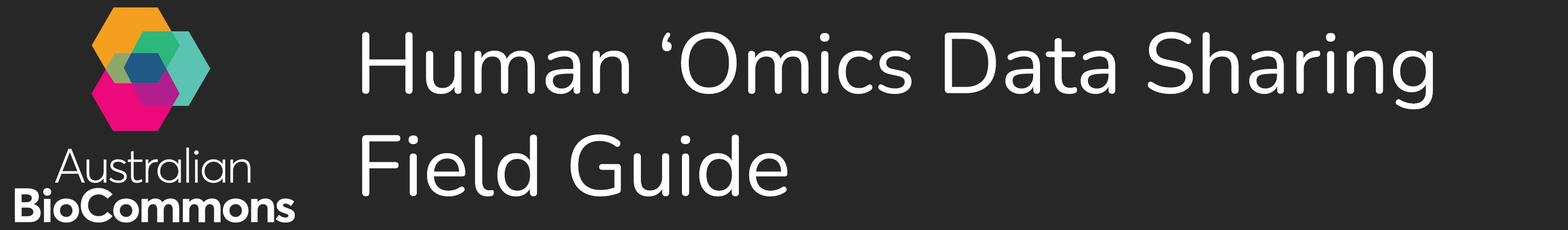
<style>
.page{position:relative;width:1568px;height:230px;background:#282728}
.page>*{position:absolute;margin:0}
.t1{font:85.5px "Nunito-Regular";color:#ffffff}
</style>
<div class="page">
<p class="t1" style="left:362px;top:32px;width:1071px;height:165px">Human ‘Omics Data Sharing<br>Field Guide</p>
</div>
